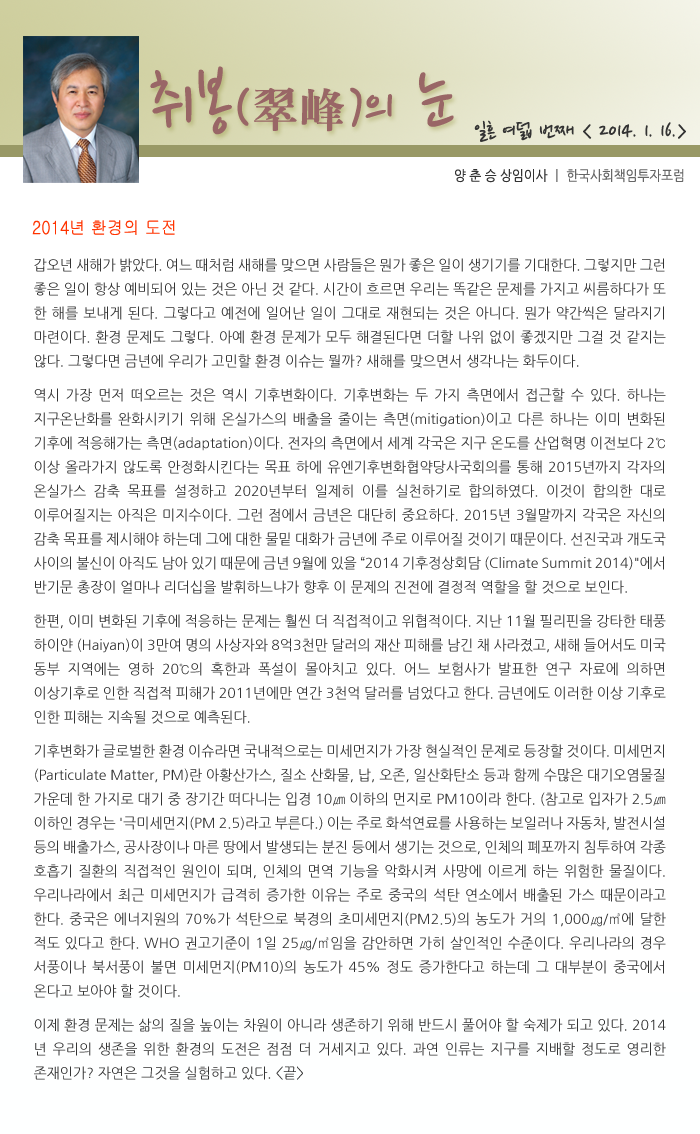
<style>
.page{position:relative;width:700px;height:1134px;background:#ffffff}
.page>*{position:absolute;margin:0}
.t1{font:77.5px "NanumPen";color:#996666}
.t2{font:60px "NanumPen";color:#996666}
.t3{font:48px "H2mjrE";color:#996666}
.t4{font:24px "NanumPen";color:#333333}
.t5{font:14px "NanumGothic";color:#666666;scale:0.9 1}
.t6{font:14px "NanumGothic";color:#333333;scale:0.9 1}
.t7{font:18px "Gulim";color:#ff3300;scale:0.9 1}
.t8{font:14px/24px "NanumGothic";color:#333333}
.t9{font:14px/10px "NanumGothic";color:#333333}
</style>
<div class="page">
<p class="t1" style="left:150px;top:66px;width:304px;height:69px">취봉<span class="t2">(</span><span class="t3">翠峰</span><span class="t2">)</span><span class="t2">의</span> 눈</p>
<p class="t4" style="left:474px;top:120px;width:212px;height:22px">일흔 여덟 번째 &lt; 2014. 1. 16.&gt;</p>
<p class="t5" style="left:455px;top:169px;width:229px;height:14px"><span class="t6">양 춘 승 상임이사 </span>ㅣ 한국사회책임투자포럼</p>
<p class="t7" style="left:32px;top:220px;width:143px;height:15px">2014년 환경의 도전</p>
<p class="t8" style="left:34px;top:258px;width:632px;height:822px;text-align:justify">갑오년 새해가 밝았다. 여느 때처럼 새해를 맞으면 사람들은 뭔가 좋은 일이 생기기를 기대한다. 그렇지만 그런 좋은 일이 항상 예비되어 있는 것은 아닌 것 같다. 시간이 흐르면 우리는 똑같은 문제를 가지고 씨름하다가 또 한 해를 보내게 된다. 그렇다고 예전에 일어난 일이 그대로 재현되는 것은 아니다. 뭔가 약간씩은 달라지기 마련이다. 환경 문제도 그렇다. 아예 환경 문제가 모두 해결된다면 더할 나위 없이 좋겠지만 그걸 것 같지는 않다. 그렇다면 금<span class="t9">년에 우리가 고민할 환경 이슈는 뭘까? 새해를 맞으면서 생각나는 화두이다.<br><br>역시 가장 먼저 떠오르는 것은 역시 기후변화이다. 기후변화는 두 가지</span> 측면에서 접근할 수 있다. 하나는 지구온난화를 완화시키기 위해 온실가스의 배출을 줄이는 측면(mitigation)이고 다른 하나는 이미 변화된 기후에 적응해가는 측면(adaptation)이다. 전자의 측면에서 세계 각국은 지구 온도를 산업혁명 이전보다 2℃ 이상 올라가지 않도록 안정화시킨다는 목표 하에 유엔기후변화협약당사국회의를 통해 2015년까지 각자의 온실가스 감축 목표를 설정하고 2020년부터 일제히 이를 실천하기로 합의하였다. 이것이 합의한 대로 이루어질지는 아직은 미지수이다. 그런 점에서 금년은 대단히 중요하다. 2015년 3월말까지 각국은 자신의 감축 목표를 제시해야 하는데 그에 대한 물밑 대화가 금년에 주로 이루어질 것이기 때문이다. 선진국과 개도국 사이의 불신이 아직도 남아 있기 때문에 금년 9월에 있을 “2014 기후정상회담 (Climate Summit 2014)"에서 반기문 총장이 얼마나 리더십을 발<span class="t9">휘하느냐가 향후 이 문제의 진전에 결정적 역할을 할 것으로 보인다.<br><br>한편, 이미 변화된 기후에 적응하는 문제는 훨씬 더 직</span>접적이고 위협적이다. 지난 11월 필리핀을 강타한 태풍 하이얀 (Haiyan)이 3만여 명의 사상자와 8억3천만 달러의 재산 피해를 남긴 채 사라졌고, 새해 들어서도 미국 동부 지역에는 영하 20℃의 혹한과 폭설이 몰아치고 있다. 어느 보험사가 발표한 연구 자료에 의하면 이상기후로 인한 직접적 피해가 2011년에만 연간 3천억 달러를 넘었다고 한다. 금년에도 이러한 이상 기후로 인한 피해는 지속될 <span class="t9">것으로 예측된다.  <br><br>기후변화가 글로벌한 환경 이슈라면</span> 국내적으로는 미세먼지가 가장 현실적인 문제로 등장할 것이다. 미세먼지(Particulate Matter, PM)란 아황산가스, 질소 산화물, 납, 오존, 일산화탄소 등과 함께 수많은 대기오염물질 가운데 한 가지로 대기 중 장기간 떠다니는 입경 10㎛ 이하의 먼지로 PM10이라 한다. (참고로 입자가 2.5㎛ 이하인 경우는 '극미세먼지(PM 2.5)라고 부른다.) 이는 주로 화석연료를 사용하는 보일러나 자동차, 발전시설 등의 배출가스, 공사장이나 마른 땅에서 발생되는 분진 등에서 생기는 것으로, 인체의 폐포까지 침투하여 각종 호흡기 질환의 직접적인 원인이 되며, 인체의 면역 기능을 악화시켜 사망에 이르게 하는 위험한 물질이다. 우리나라에서 최근 미세먼지가 급격히 증가한 이유는 주로 중국의 석탄 연소에서 배출된 가스 때문이라고 한다. 중국은 에너지원의 70%가 석탄으로 북경의 초미세먼지(PM2.5)의 농도가 거의 1,000㎍/㎥에 달한 적도 있다고 한다. WHO 권고기준이 1일 25㎍/㎥임을 감안하면 가히 살인적인 수준이다. 우리나라의 경우 서풍이나 북서풍이 불면 미세먼지(PM10)의 농도가 45% 정도 증가한다고 하는데 그 대부분이 중국에서 온다고 보<span class="t9">아야 할 것이다. <br><br>이제 환경 문제는 삶의 질을 높이는</span> 차원이 아니라 생존하기 위해 반드시 풀어야 할 숙제가 되고 있다. 2014년 우리의 생존을 위한 환경의 도전은 점점 더 거세지고 있다. 과연 인류는 지구를 지배할 정도로 영리한 존재인가? 자연은 그것을 실험하고 있다. &lt;끝&gt;</p>
</div>
